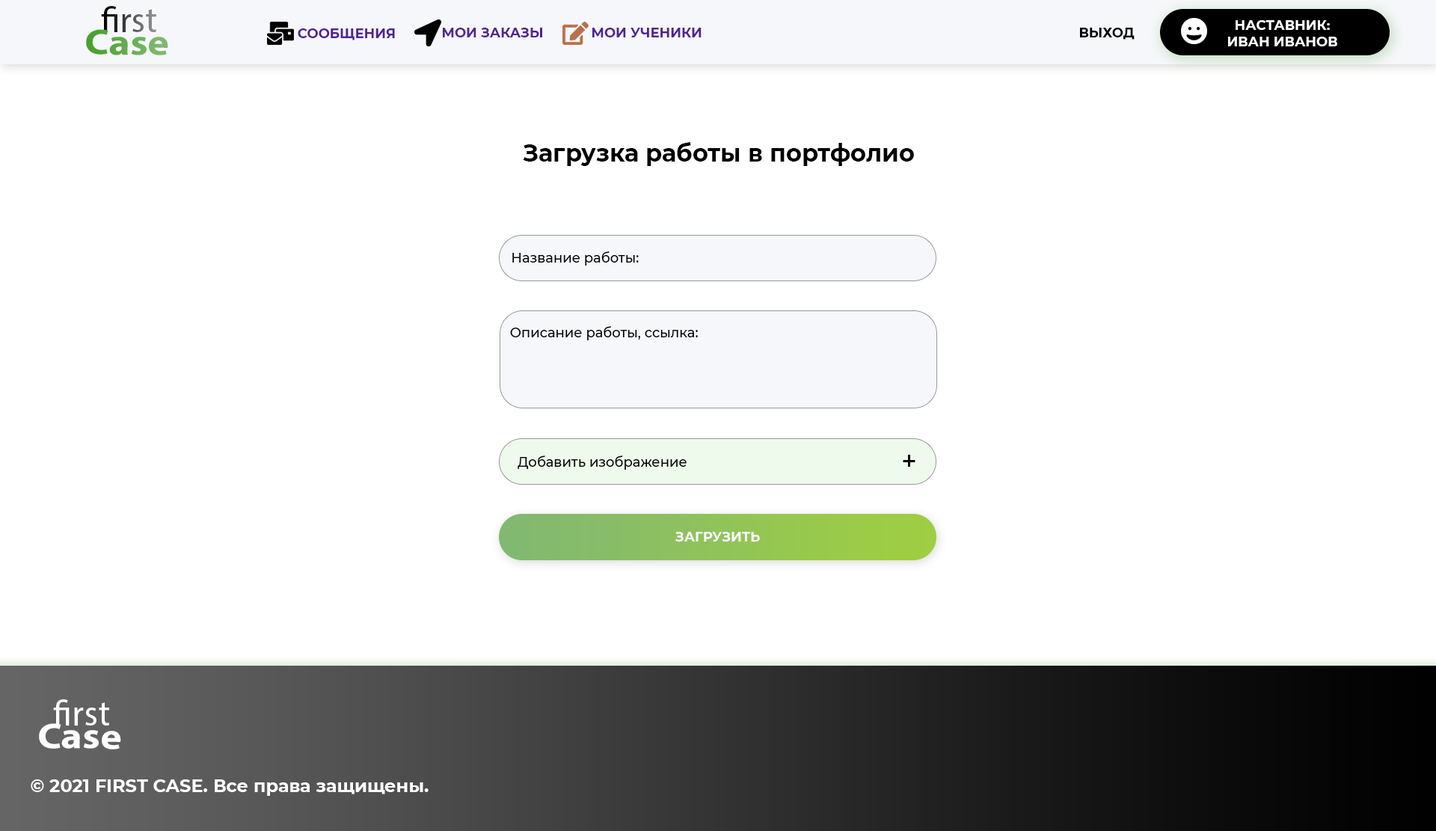
<style>
.page{position:relative;width:1436px;height:831px;background:#ffffff}
.page>*{position:absolute;margin:0}
.t1{font:35.9px "MyriadPro-Regular"}
.t2{font:35.9px "MyriadPro-Bold";scale:1.13 1}
.t3{font:35.9px "MyriadPro-Regular";scale:1.13 1}
.t4{font:13.5px "Montserrat-Bold";color:#4f2492;text-transform:uppercase}
.t5{font:13.5px "Montserrat-Bold";color:#502492;text-transform:uppercase}
.t6{font:13.5px "Montserrat-Bold";color:#000000;text-transform:uppercase}
.t7{font:13.5px "Montserrat-Bold";color:#ffffff;text-transform:uppercase}
.t8{font:23.9px "Montserrat-Bold";color:#000000}
.t9{font:13.5px "Montserrat-Medium";color:#000000}
.t10{font:26.9px "Montserrat-Medium";color:#000000}
.t11{font:35.9px "MyriadPro-Regular";color:#ffffff}
.t12{font:35.9px "MyriadPro-Bold";color:#ffffff;scale:1.13 1}
.t13{font:35.9px "MyriadPro-Regular";color:#ffffff;scale:1.13 1}
.t14{font:17.9px "Montserrat-Bold";color:#ffffff}
</style>
<div class="page">
<p class="t1" style="left:101px;top:6px;width:55px;height:26px">first</p>
<p class="t2" style="left:86px;top:29px;width:82px;height:26px;rotate:1deg"><span class="t3">       </span>Case</p>
<p class="t4" style="left:298px;top:28px;width:97px;height:12px">СООБЩЕНИЯ</p>
<p class="t5" style="left:443px;top:28px;width:99px;height:9px">МОИ ЗАКАЗЫ</p>
<p class="t4" style="left:592px;top:28px;width:109px;height:9px">мои ученики</p>
<p class="t6" style="left:1080px;top:28px;width:54px;height:12px">ВЫХОД</p>
<p class="t7" style="left:1228px;top:20px;width:109px;height:26px;text-align:center">наставник:<br>иВАН иВАНОВ</p>
<p class="t8" style="left:523px;top:142px;width:391px;height:24px">Загрузка работы в портфолио</p>
<p class="t9" style="left:512px;top:251px;width:127px;height:14px">Название работы:</p>
<p class="t9" style="left:510px;top:326px;width:188px;height:14px">Описание работы, ссылка:</p>
<p class="t9" style="left:517px;top:455px;width:169px;height:15px">Добавить изображение</p>
<p class="t10" style="left:902px;top:455px;width:13px;height:12px">+</p>
<p class="t7" style="left:675px;top:532px;width:85px;height:9px">загрузить</p>
<p class="t11" style="left:53px;top:699px;width:56px;height:26px">first</p>
<p class="t12" style="left:39px;top:723px;width:82px;height:26px;rotate:1deg"><span class="t13">       </span>Case</p>
<p class="t14" style="left:31px;top:779px;width:397px;height:17px">© 2021 FIRST CASE. Все права защищены.</p>
</div>
